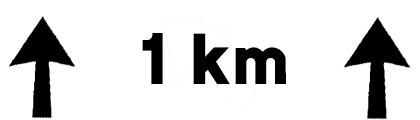
<style>
.page{position:relative;width:420px;height:120px;background:#ffffff}
.page>*{position:absolute;margin:0}
.t1{font:72px "Ccrige-Regular";color:#000000}
</style>
<div class="page">
<p class="t1" style="left:142px;top:33px;width:144px;height:51px">1 km</p>
</div>
